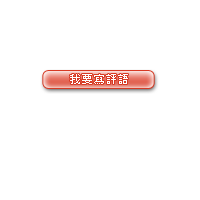
<style>
.page{position:relative;width:200px;height:200px;background:#ffffff}
.page>*{position:absolute;margin:0}
.t1{font:11px "MingLiU";color:#ffffff}
</style>
<div class="page">
<p class="t1" style="left:70px;top:74px;width:58px;height:10px">我要寫評語</p>
</div>
